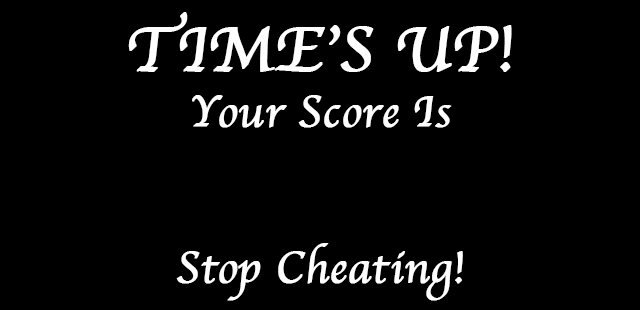
<style>
.page{position:relative;width:640px;height:310px;background:#000000}
.page>*{position:absolute;margin:0}
.t1{font:65px "Apple-Chancery";color:#fffefe;font-weight:bold}
.t2{font:45px "Apple-Chancery";color:#fffefe;font-weight:bold}
</style>
<div class="page">
<p class="t1" style="left:128px;top:12px;width:384px;height:60px">TIME’S UP!</p>
<p class="t2" style="left:192px;top:95px;width:260px;height:33px">Your Score Is</p>
<p class="t2" style="left:176px;top:243px;width:287px;height:58px">Stop Cheating!</p>
</div>
